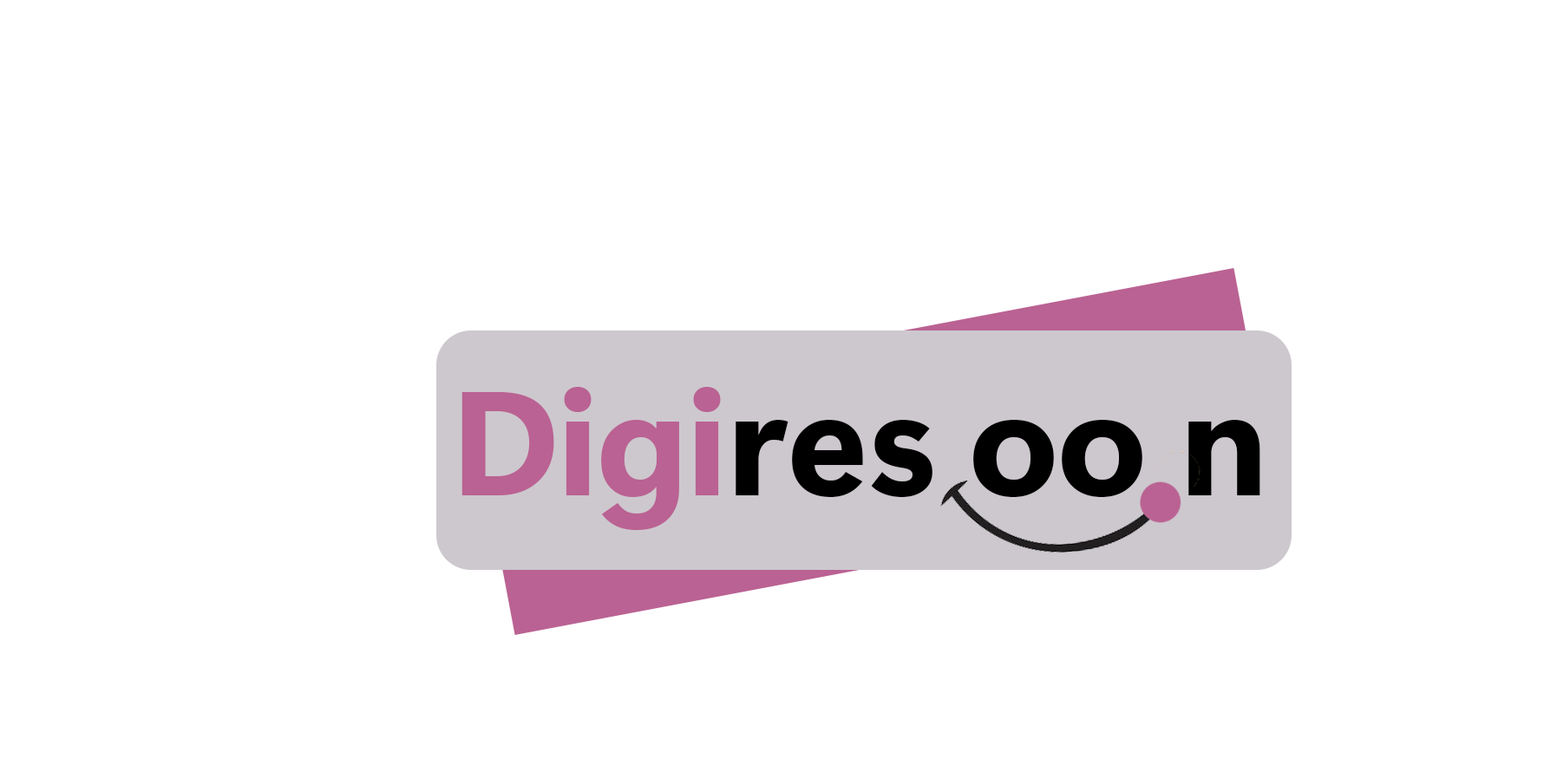
<style>
.page{position:relative;width:1544px;height:772px;background:#ffffff}
.page>*{position:absolute;margin:0}
.t1{font:147.5px "SegoeUIVariable-BoldDisplay";letter-spacing:-0.005em;color:#000000}
.t2{font:147.5px "SegoeUIVariable-BoldDisplay";letter-spacing:-0.005em;color:#ba6293}
</style>
<div class="page">
<p class="t1" style="left:462px;top:387px;width:799px;height:143px"><span class="t2">Digi</span>res oo n</p>
</div>
